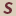
<style>
.page{position:relative;width:16px;height:16px;background:#dacdba}
.page>*{position:absolute;margin:0}
.t1{font:18px "SourceSansPro-BoldIt";color:#6c2a34}
</style>
<div class="page">
<p class="t1" style="left:3px;top:2px;width:10px;height:12px">S</p>
</div>
